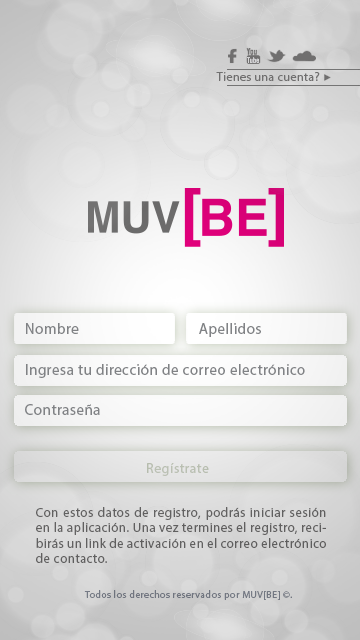
<style>
.page{position:relative;width:360px;height:640px}
.page>*{position:absolute;margin:0}
.t1{font:12px "MyriadPro-Regular";letter-spacing:0.035em;color:#706f6f}
.t2{font:15px "MyriadPro-Regular";letter-spacing:0.035em;color:#808285}
.t3{font:13px "MyriadPro-Regular";letter-spacing:0.035em;color:#727171}
.t4{font:10px "MyriadPro-Regular";letter-spacing:0.035em;color:#727781}
</style>
<div class="page">
<p class="t1" style="left:216px;top:72px;width:104px;height:9px">Tienes una cuenta?</p>
<p class="t2" style="left:26px;top:323px;width:53px;height:11px">Nombre</p>
<p class="t2" style="left:199px;top:323px;width:62px;height:14px">Apellidos</p>
<p class="t2" style="left:26px;top:364px;width:279px;height:14px">Ingresa tu dirección de correo electrónico</p>
<p class="t2" style="left:25px;top:404px;width:75px;height:11px">Contraseña</p>
<p class="t3" style="left:36px;top:507px;width:290px;height:56px;text-align:justify">Con estos datos de registro, podrás iniciar sesión en la aplicación. Una vez termines el registro, recibirás un link de activación en el correo electrónico de contacto.</p>
<p class="t4" style="left:84px;top:590px;width:208px;height:10px">Todos los derechos reservados por MUV[BE] ©.</p>
</div>
